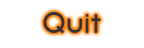
<style>
.page{position:relative;width:144px;height:48px;background:#ffffff}
.page>*{position:absolute;margin:0}
.t1{font:30px "Neon80s";color:#343232}
</style>
<div class="page">
<p class="t1" style="left:43px;top:12px;width:58px;height:21px">Quit</p>
</div>
